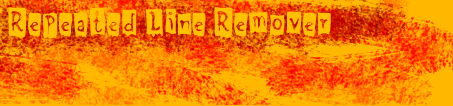
<style>
.page{position:relative;width:453px;height:106px}
.page>*{position:absolute;margin:0}
.t1{font:36px "BeatMyGuest";color:#ffc000}
</style>
<div class="page">
<p class="t1" style="left:8px;top:7px;width:323px;height:32px">Repeated Line Remover</p>
</div>
